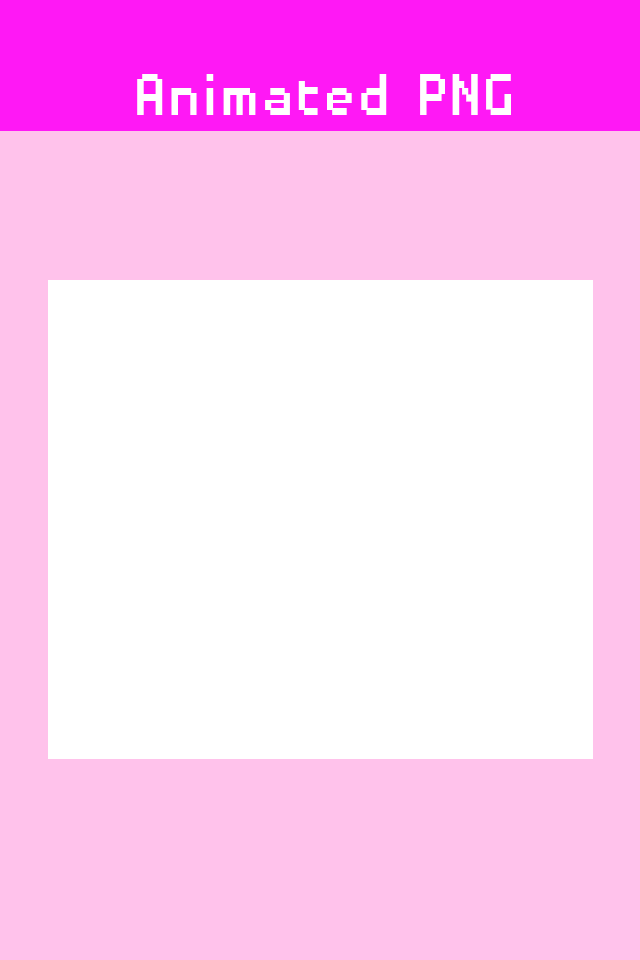
<style>
.page{position:relative;width:640px;height:960px;background:#ffc2eb}
.page>*{position:absolute;margin:0}
.t1{font:76.6px "DisposableDroidBB";color:#ffffff;scale:0.91 1}
</style>
<div class="page">
<p class="t1" style="left:137px;top:74px;width:374px;height:41px">Animated PNG</p>
</div>
